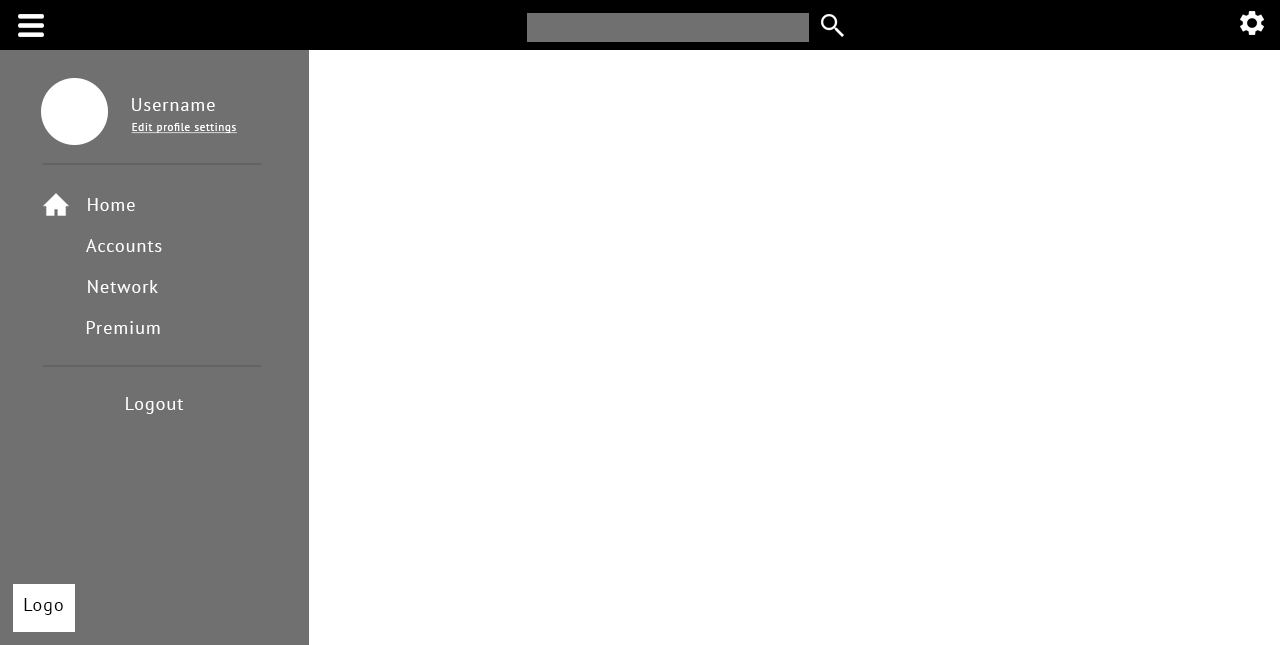
<style>
.page{position:relative;width:1280px;height:645px;background:#ffffff}
.page>*{position:absolute;margin:0}
.t1{font:18px "PTSans-Regular";letter-spacing:0.06em;color:#ffffff}
.t2{font:11px "PTSans-Regular";letter-spacing:0.06em;color:#ffffff;text-decoration:underline}
.t3{font:18px "PTSans-Regular";letter-spacing:0.06em;color:#000000}
</style>
<div class="page">
<p class="t1" style="left:132px;top:98px;width:83px;height:13px">Username</p>
<p class="t2" style="left:131px;top:123px;width:106px;height:11px">Edit profile settings</p>
<p class="t1" style="left:88px;top:198px;width:47px;height:13px">Home</p>
<p class="t1" style="left:86px;top:239px;width:76px;height:13px">Accounts</p>
<p class="t1" style="left:88px;top:280px;width:70px;height:13px">Network</p>
<p class="t1" style="left:86px;top:321px;width:74px;height:13px">Premium</p>
<p class="t1" style="left:126px;top:397px;width:58px;height:17px">Logout</p>
<p class="t3" style="left:24px;top:598px;width:39px;height:17px">Logo</p>
</div>
